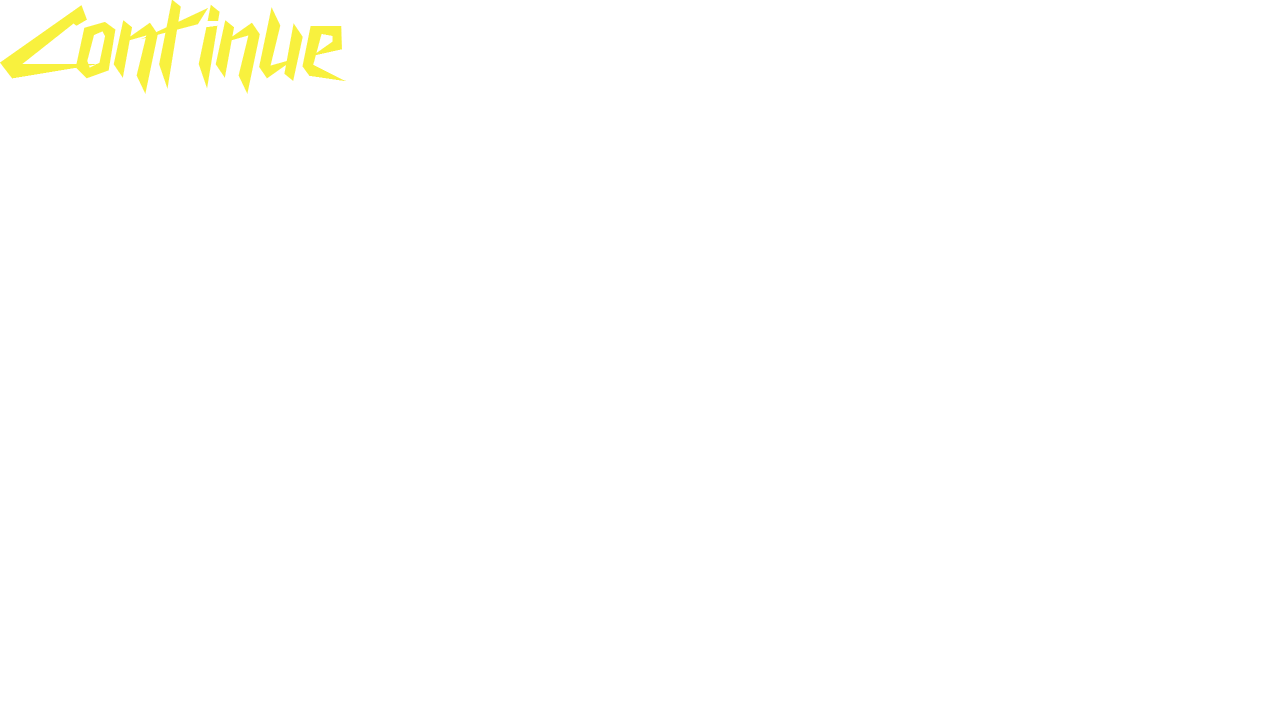
<style>
.page{position:relative;width:1280px;height:720px;background:#ffffff}
.page>*{position:absolute;margin:0}
.t1{font:100px "CyberwayRiders";color:#f8f13e}
</style>
<div class="page">
<p class="t1" style="left:0px;top:0px;width:346px;height:94px">Continue</p>
</div>
